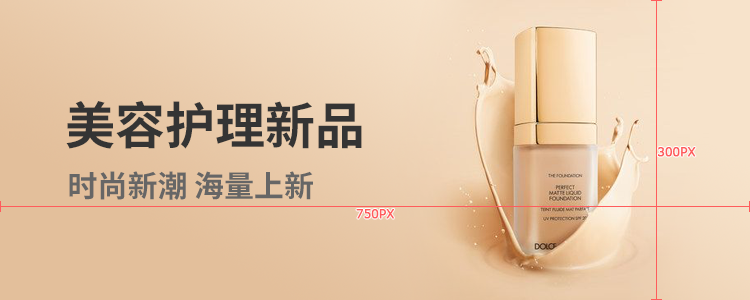
<style>
.page{position:relative;width:750px;height:300px}
.page>*{position:absolute;margin:0}
.t1{font:50px "SourceHanSansCN-Bold";color:#343434}
.t2{font:12px "Verdana";color:#ff5c5c;font-weight:bold}
.t3{font:30px "SourceHanSansCN-Bold";color:#666666}
</style>
<div class="page">
<p class="t1" style="left:66px;top:101px;width:296px;height:48px">美容护理新品</p>
<p class="t2" style="left:657px;top:147px;width:39px;height:10px">300PX</p>
<p class="t3" style="left:69px;top:171px;width:244px;height:29px">时尚新潮 海量上新</p>
<p class="t2" style="left:356px;top:209px;width:39px;height:10px">750PX</p>
</div>
